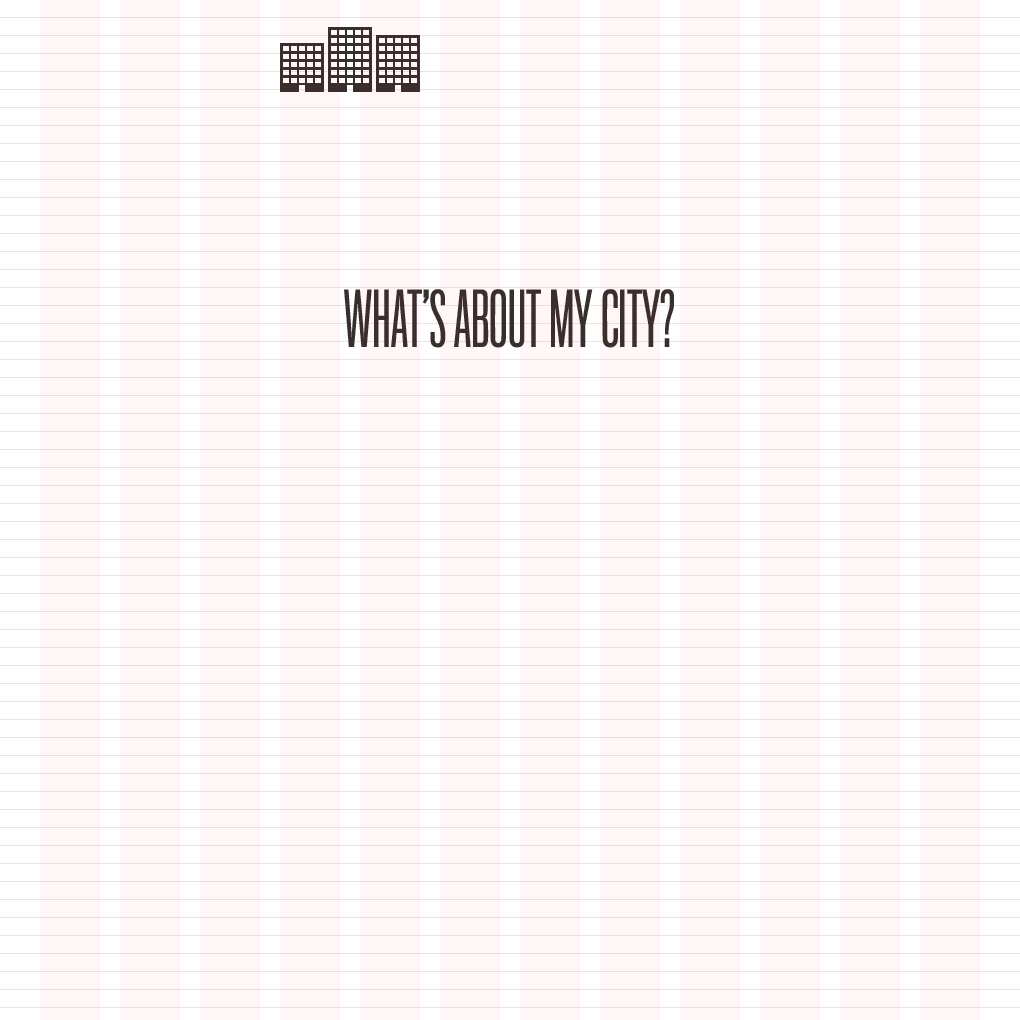
<style>
.page{position:relative;width:1020px;height:1020px;background:#fff7f7}
.page>*{position:absolute;margin:0}
.t1{font:72px "TitlingGothicFBSkyline-Regular";color:#362f2d;text-transform:uppercase}
</style>
<div class="page">
<p class="t1" style="left:344px;top:289px;width:330px;height:59px">what’s about my city?</p>
</div>
